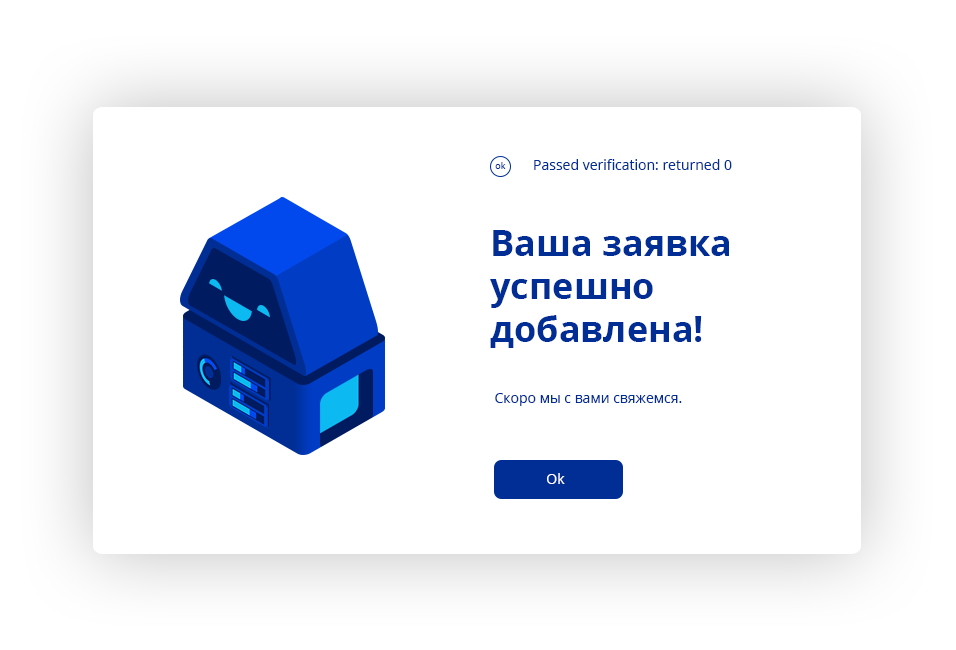
<style>
.page{position:relative;width:956px;height:650px;background:#ffffff}
.page>*{position:absolute;margin:0}
.t1{font:14px "OpenSans-Regular";color:#002e95}
.t2{font:9px "OpenSans-Regular";color:#002e95}
.t3{font:36px "OpenSans-Bold";color:#002e95}
.t4{font:14px "OpenSans-Regular";color:#ffffff}
</style>
<div class="page">
<p class="t1" style="left:534px;top:159px;width:198px;height:11px">Passed verification: returned 0</p>
<p class="t2" style="left:495px;top:162px;width:11px;height:7px">ok</p>
<p class="t3" style="left:490px;top:230px;width:239px;height:118px;text-align:right">Ваша заявка успешно добавлена!</p>
<p class="t1" style="left:495px;top:393px;width:187px;height:13px">Скоро мы с вами свяжемся.</p>
<p class="t4" style="left:547px;top:473px;width:18px;height:11px">Ok</p>
</div>
